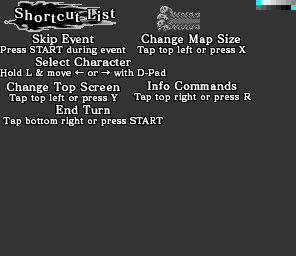
<style>
.page{position:relative;width:296px;height:256px;background:#333333}
.page>*{position:absolute;margin:0}
.t1{font:13px "MatisseVPro-DB";letter-spacing:0.1em;color:#ffffff}
.t2{font:9px/10px "MatisseVPro-DB";letter-spacing:0.025em;color:#ffffff}
.t3{font:11px/10px "MatisseVPro-DB";letter-spacing:0.025em;color:#ffffff}
.t4{font:13.5px/10px "MatisseVPro-DB";letter-spacing:0.025em;color:#ffffff;scale:0.67 1}
.t5{font:9.9px/10px "MatisseVPro-DB";letter-spacing:0.025em;color:#ffffff;scale:1.11 1}
.t6{font:9px/10px "MatisseVPro-DB";letter-spacing:0.05em;color:#ffffff}
</style>
<div class="page">
<p class="t1" style="left:15px;top:8px;width:100px;height:15px">Shortcut List</p>
<p class="t2" style="left:0px;top:34px;width:126px;height:21px;text-align:center"><span class="t3">Skip Event<br></span>Press START during event</p>
<p class="t2" style="left:137px;top:34px;width:109px;height:21px;text-align:center"><span class="t3">Change Map Size<br></span>Tap top left or press X</p>
<p class="t3" style="left:0px;top:57px;width:166px;height:20px;text-align:center">Select Character<br><span class="t2">Hold L &amp; move </span><span class="t4">←</span><span class="t2"> or </span><span class="t4">→</span><span class="t2"> with D-Pad</span></p>
<p class="t2" style="left:6px;top:82px;width:114px;height:21px;text-align:center"><span class="t3">Change Top Screen<br></span>Tap top left or press Y</p>
<p class="t2" style="left:134px;top:81px;width:117px;height:21px;text-align:center"><span class="t3">In</span><span class="t5">f</span><span class="t3">o Commands<br></span>Tap top right or p<span class="t6">ress</span> R</p>
<p class="t2" style="left:3px;top:105px;width:160px;height:21px;text-align:center"><span class="t3">End Turn<br></span>Tap bottom right or press START</p>
</div>
